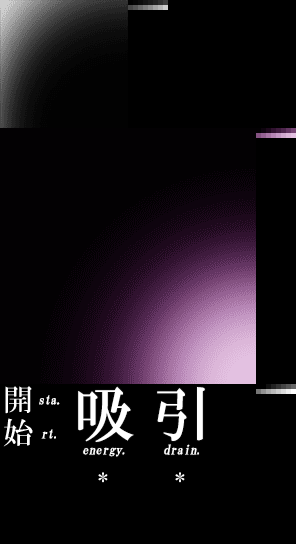
<style>
.page{position:relative;width:296px;height:544px;background:#000000}
.page>*{position:absolute;margin:0}
.t1{font:13px/20px "HGMinchoB";letter-spacing:0.01em;color:#ffffff;font-style:italic}
.t2{font:60px/20px "HGMinchoB";letter-spacing:0.01em;color:#ffffff}
.t3{font:13px/18px "HGMinchoB";letter-spacing:0.01em;color:#ffffff;font-style:italic;scale:0.8 1}
.t4{font:13px/20px "HGMinchoB";letter-spacing:0.01em;color:#ffffff;font-style:italic;scale:0.8 1}
.t5{font:13px/34px "HGMinchoB";letter-spacing:-0.025em;color:#ffffff;font-style:italic}
</style>
<div class="page">
<p class="t1" style="left:78px;top:386px;width:56px;height:71px;text-align:center"><span class="t2">吸<br></span>energy<span class="t3">.</span></p>
<p class="t1" style="left:157px;top:387px;width:48px;height:68px;text-align:center"><span class="t2">引<br></span>drain<span class="t4">.</span></p>
<p class="t5" style="left:39px;top:395px;width:21px;height:44px;text-align:center">sta.<br>rt.</p>
</div>
